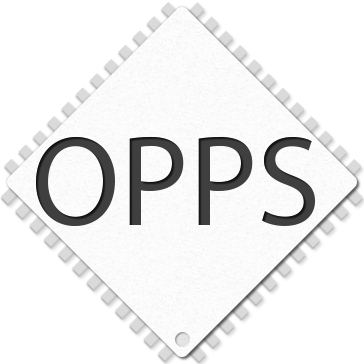
<style>
.page{position:relative;width:364px;height:364px;background:#ffffff}
.page>*{position:absolute;margin:0}
.t1{font:129.2px "MyriadPro-Regular";color:#3f3f3f}
</style>
<div class="page">
<p class="t1" style="left:36px;top:136px;width:279px;height:91px">OPPS</p>
</div>
